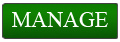
<style>
.page{position:relative;width:120px;height:42px;background:#ffffff}
.page>*{position:absolute;margin:0}
.t1{font:22px "TimesNewRomanPSMT";color:#ffffff}
</style>
<div class="page">
<p class="t1" style="left:12px;top:12px;width:96px;height:15px">MANAGE</p>
</div>
